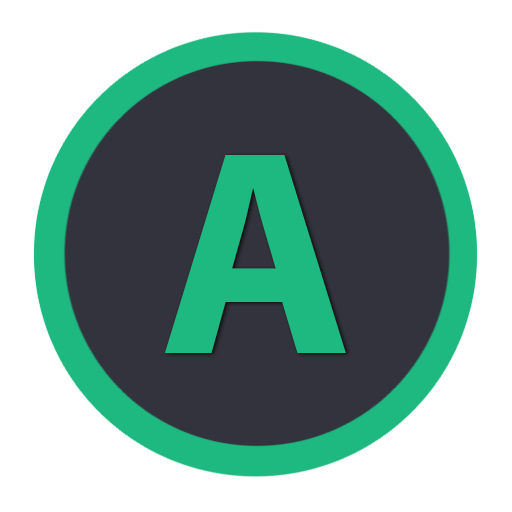
<style>
.page{position:relative;width:512px;height:512px;background:#ffffff}
.page>*{position:absolute;margin:0}
.t1{font:294px "MyriadPro-Bold";color:#1eb980}
</style>
<div class="page">
<p class="t1" style="left:165px;top:155px;width:181px;height:198px">A</p>
</div>
